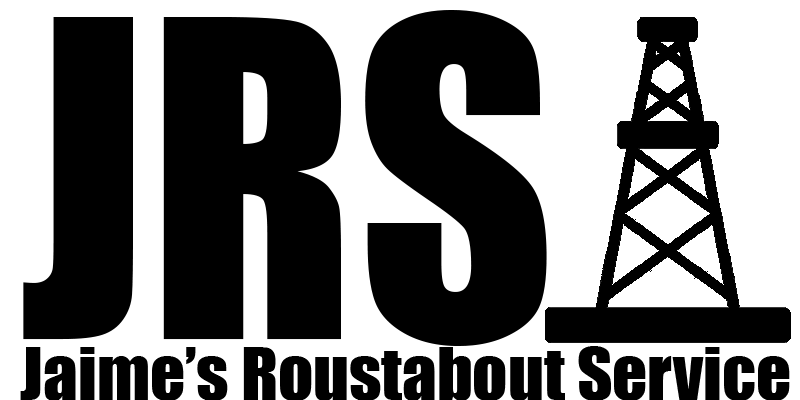
<style>
.page{position:relative;width:800px;height:400px;background:#000000}
.page>*{position:absolute;margin:0}
.t1{font:407.2px "Impact";color:#000000;scale:0.95 1}
.t2{font:66.9px "Impact";color:#000000}
</style>
<div class="page">
<p class="t1" style="left:23px;top:10px;width:524px;height:336px">JRS</p>
<p class="t2" style="left:20px;top:346px;width:770px;height:55px">Jaime’s Roustabout Service</p>
</div>
